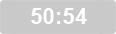
<style>
.page{position:relative;width:116px;height:34px;background:#c9c9c9}
.page>*{position:absolute;margin:0}
.t1{font:22.1px "Arial-BoldMT";color:#ffffff}
</style>
<div class="page">
<p class="t1" style="left:31px;top:8px;width:56px;height:16px">50:54</p>
</div>
